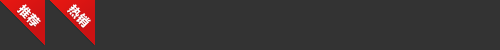
<style>
.page{position:relative;width:500px;height:50px;background:#333333}
.page>*{position:absolute;margin:0}
.t1{font:12px "MicrosoftYaHei-Bold";letter-spacing:0.05em;color:#ffffff}
</style>
<div class="page">
<p class="t1" style="left:17px;top:4px;width:24px;height:23px;rotate:46deg">推荐</p>
<p class="t1" style="left:67px;top:4px;width:24px;height:24px;rotate:46deg">热销</p>
</div>
